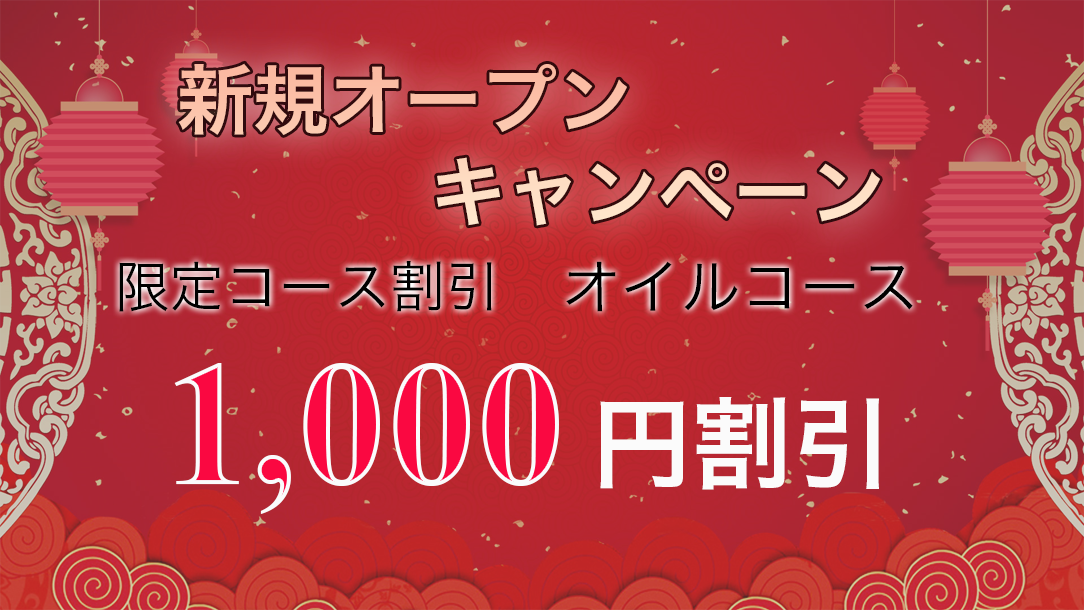
<style>
.page{position:relative;width:1084px;height:610px}
.page>*{position:absolute;margin:0}
.t1{font:76px/91.7px "HiraKakuPro-W6"}
.t2{font:55.1px "HiraKakuPro-W3";color:#010101}
.t3{font:59.5px "HiraKakuPro-W3";color:#000000}
.t4{font:179.2px "TimesNewRomanPS-BoldMT"}
.t5{font:100px "HiraKakuPro-W6";color:#fbfbfb}
</style>
<div class="page">
<p class="t1" style="left:178px;top:63px;width:702px;height:163px">新規オープン  <br>          キャンペーン</p>
<p class="t2" style="left:119px;top:261px;width:373px;height:51px">限定コース割引</p>
<p class="t3" style="left:566px;top:261px;width:347px;height:51px">オイルコース</p>
<p class="t4" style="left:174px;top:363px;width:385px;height:151px">1,000</p>
<p class="t5" style="left:600px;top:397px;width:279px;height:93px">円割引</p>
</div>
